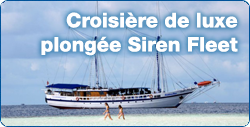
<style>
.page{position:relative;width:250px;height:127px}
.page>*{position:absolute;margin:0}
.t1{font:20.1px "Helvetica85-Heavy";color:#ffffff}
</style>
<div class="page">
<p class="t1" style="left:41px;top:12px;width:197px;height:44px;text-align:right">Croisière de luxe plongée Siren Fleet</p>
</div>
